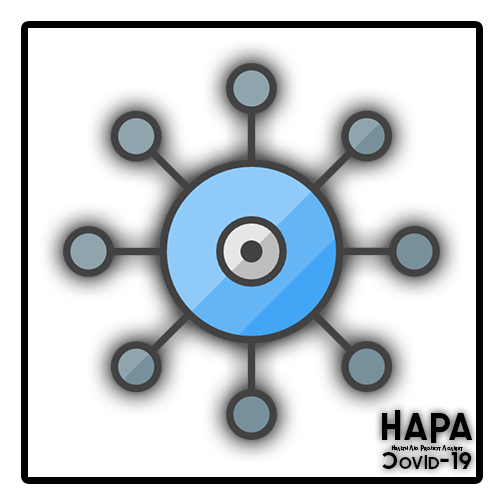
<style>
.page{position:relative;width:504px;height:504px;background:#ffffff}
.page>*{position:absolute;margin:0}
.t1{font:39.1px "LEonardoDemoBold";color:#000000}
.t2{font:6.5px "LEonardoDemoBold";color:#000000;font-variant:small-caps}
.t3{font:24.9px "LEonardoDemoBold";color:#000000;font-variant:small-caps}
</style>
<div class="page">
<p class="t1" style="left:382px;top:410px;width:91px;height:33px">HaPa</p>
<p class="t2" style="left:391px;top:445px;width:72px;height:6px">Health Aid Project Against</p>
<p class="t3" style="left:382px;top:452px;width:90px;height:17px">Covid-19</p>
</div>
